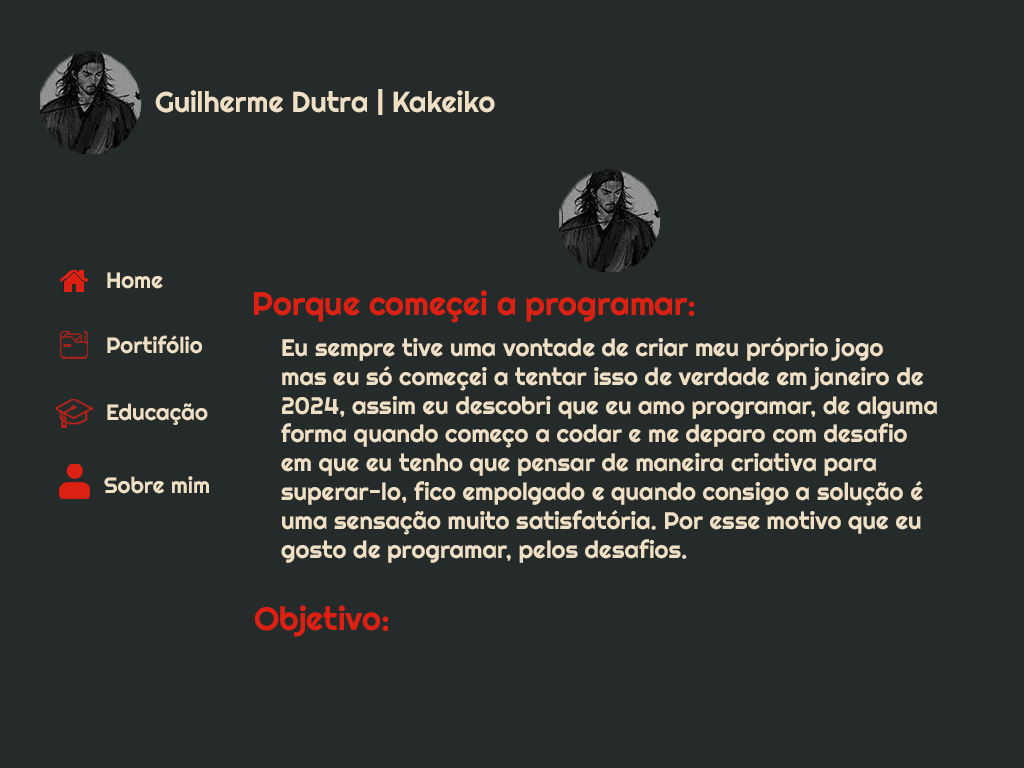
<style>
.page{position:relative;width:1024px;height:768px;background:#252b2b}
.page>*{position:absolute;margin:0}
.t1{font:28.7px "Righteous-Regular";color:#efdfc5}
.t2{font:22.3px "Righteous-Regular";color:#efdfc5}
.t3{font:32.4px "Righteous-Regular";color:#dc2011}
.t4{font:24px "Righteous-Regular";color:#efdfc5}
</style>
<div class="page">
<p class="t1" style="left:155px;top:89px;width:340px;height:26px">Guilherme Dutra | Kakeiko</p>
<p class="t2" style="left:107px;top:272px;width:56px;height:17px">Home</p>
<p class="t3" style="left:254px;top:290px;width:441px;height:33px">Porque começei a programar:</p>
<p class="t2" style="left:107px;top:335px;width:95px;height:19px">Portifólio</p>
<p class="t4" style="left:281px;top:337px;width:656px;height:226px">Eu sempre tive uma vontade de criar meu próprio jogo<br>mas eu só começei a tentar isso de verdade em janeiro de<br>2024, assim eu descobri que eu amo programar, de alguma <br>forma quando começo a codar e me deparo com desafio<br>em que eu tenho que pensar de maneira criativa para<br>superar-lo, fico empolgado e quando consigo a solução é<br>uma sensação muito satisfatória. Por esse motivo que eu<br>gosto de programar, pelos desafios.</p>
<p class="t2" style="left:107px;top:403px;width:101px;height:22px">Educação</p>
<p class="t2" style="left:104px;top:476px;width:105px;height:18px">Sobre mim</p>
<p class="t3" style="left:254px;top:605px;width:135px;height:32px">Objetivo:</p>
</div>
